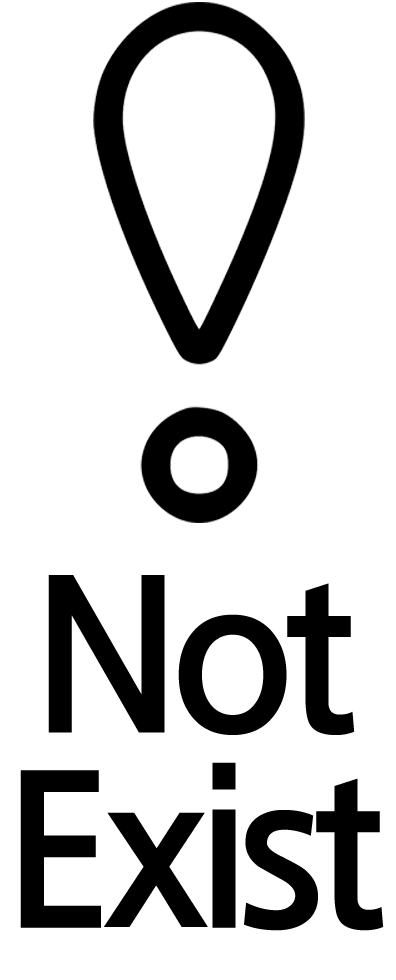
<style>
.page{position:relative;width:396px;height:980px;background:#ffffff}
.page>*{position:absolute;margin:0}
.t1{font:210.8px/195.2px "JejuGothicOTF";letter-spacing:-0.07em;color:#000000}
</style>
<div class="page">
<p class="t1" style="left:20px;top:575px;width:364px;height:356px;text-align:center">Not<br>Exist</p>
</div>
